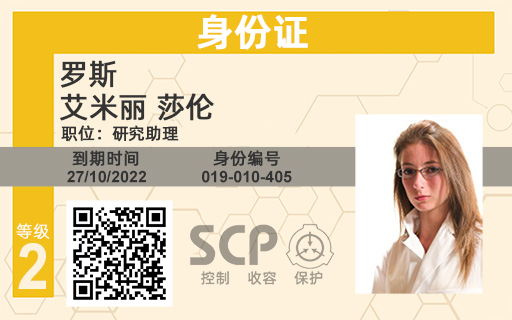
<style>
.page{position:relative;width:512px;height:320px;background:#fef2dc}
.page>*{position:absolute;margin:0}
.t1{font:37.5px "AlibabaPuHuiTiM";color:#ffffff;font-weight:bold}
.t2{font:29.2px "AlibabaPuHuiTiR";color:#333334;font-weight:bold}
.t3{font:16.7px "AlibabaPuHuiTiR";color:#333334;font-weight:bold}
.t4{font:16.7px "AlibabaPuHuiTiL";color:#ffffff;font-weight:bold}
</style>
<div class="page">
<p class="t1" style="left:197px;top:14px;width:111px;height:36px">身份证</p>
<p class="t2" style="left:60px;top:60px;width:57px;height:28px">罗斯</p>
<p class="t2" style="left:60px;top:93px;width:154px;height:28px">艾米丽 莎伦</p>
<p class="t3" style="left:61px;top:125px;width:118px;height:17px">职位：研究助理</p>
<p class="t3" style="left:72px;top:150px;width:67px;height:17px">到期时间</p>
<p class="t3" style="left:213px;top:150px;width:68px;height:17px">身份编号</p>
<p class="t4" style="left:16px;top:223px;width:34px;height:16px">等级</p>
</div>
